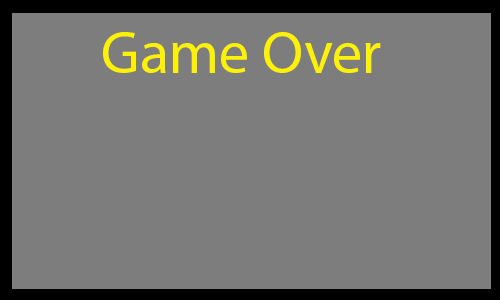
<style>
.page{position:relative;width:500px;height:300px;background:#7d7d7d}
.page>*{position:absolute;margin:0}
.t1{font:60px "MyriadPro-Regular";color:#fff200}
</style>
<div class="page">
<p class="t1" style="left:103px;top:32px;width:278px;height:41px">Game Over</p>
</div>
